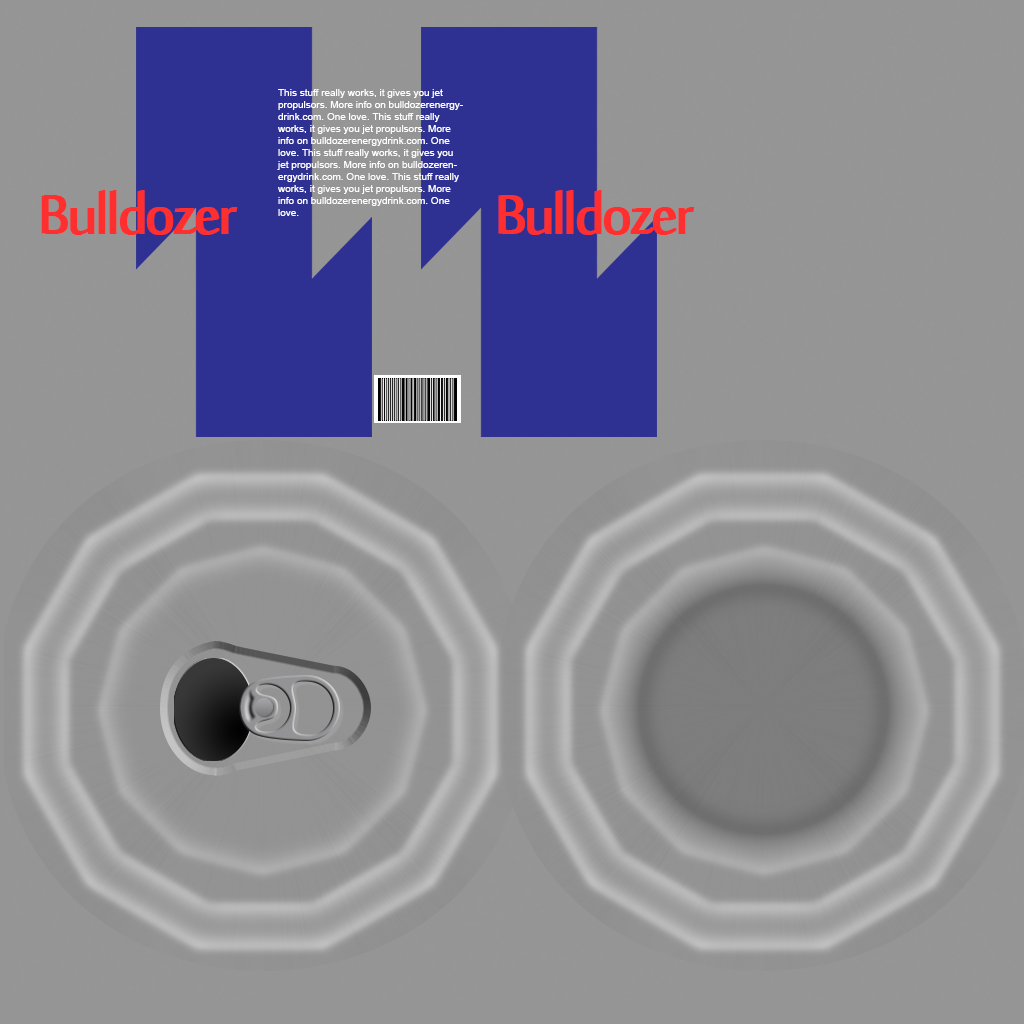
<style>
.page{position:relative;width:1024px;height:1024px;background:#959595}
.page>*{position:absolute;margin:0}
.t1{font:10px "ArialMT";color:#ffffff}
.t2{font:75px "SakkalMajalla";letter-spacing:-0.06em;color:#fe2f2f;font-weight:bold}
</style>
<div class="page">
<p class="t1" style="left:277px;top:89px;width:186px;height:127px">This stuff really works, it gives you jet propulsors. More info on bulldozerenergydrink.com. One love. This stuff really works, it gives you jet propulsors. More info on bulldozerenergydrink.com. One love. This stuff really works, it gives you jet propulsors. More info on bulldozerenergydrink.com. One love. This stuff really works, it gives you jet propulsors. More info on bulldozerenergydrink.com. One love.</p>
<p class="t2" style="left:41px;top:190px;width:197px;height:45px">Bulldozer</p>
<p class="t2" style="left:498px;top:190px;width:197px;height:45px">Bulldozer</p>
</div>
